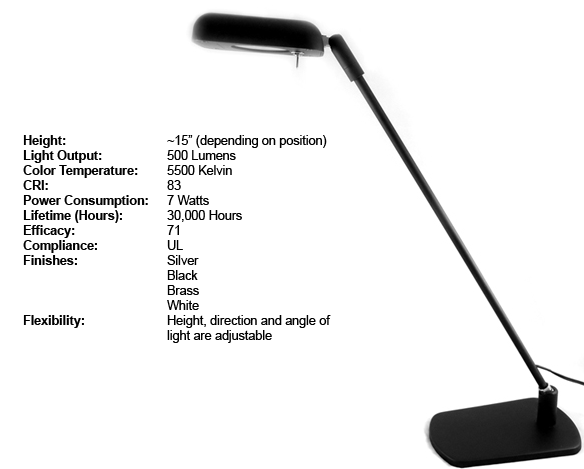
<style>
.page{position:relative;width:584px;height:469px;background:#ffffff}
.page>*{position:absolute;margin:0}
.t1{font:12.5px "ArialMT";color:#000000}
.t2{font:12.5px "Arial-BoldMT";color:#000000}
</style>
<div class="page">
<p class="t1" style="left:23px;top:135px;width:308px;height:208px"><span class="t2">Height:   ~</span>15” (depending on position)<br><span class="t2">Light Output:  </span>500 Lumens<br><span class="t2">Color Temperature: </span>5500 Kelvin<br><span class="t2">CRI:    </span>83<br><span class="t2">Power Consumption: </span>7 Watts<br><span class="t2">Lifetime (Hours):  </span>30,000 Hours<br><span class="t2">Efficacy:   </span>71<br><span class="t2">Compliance:  </span>UL<br><span class="t2">Finishes:   </span>Silver<br>    Black<br>    Brass<br>    White<br><span class="t2">Flexibility:   </span>Height, direction and angle of      light are adjustable</p>
</div>
